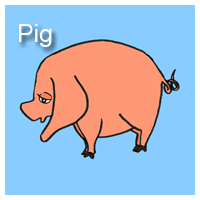
<style>
.page{position:relative;width:200px;height:200px;background:#89ccff}
.page>*{position:absolute;margin:0}
.t1{font:25px "ArialMT";color:#ffffff}
</style>
<div class="page">
<p class="t1" style="left:19px;top:24px;width:33px;height:23px">Pig</p>
</div>
